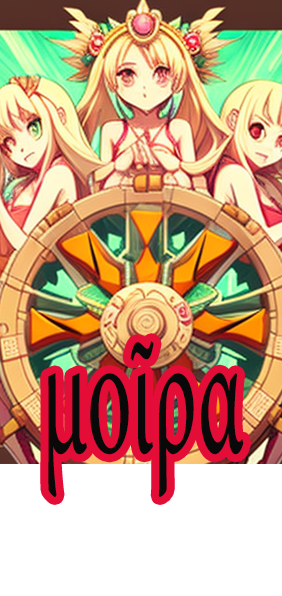
<style>
.page{position:relative;width:282px;height:596px;background:#ffffff}
.page>*{position:absolute;margin:0}
.t1{font:175px "MinionPro-Regular";color:#0a0909;scale:0.5 1}
</style>
<div class="page">
<p class="t1" style="left:48px;top:341px;width:196px;height:156px">μοῖρα</p>
</div>
